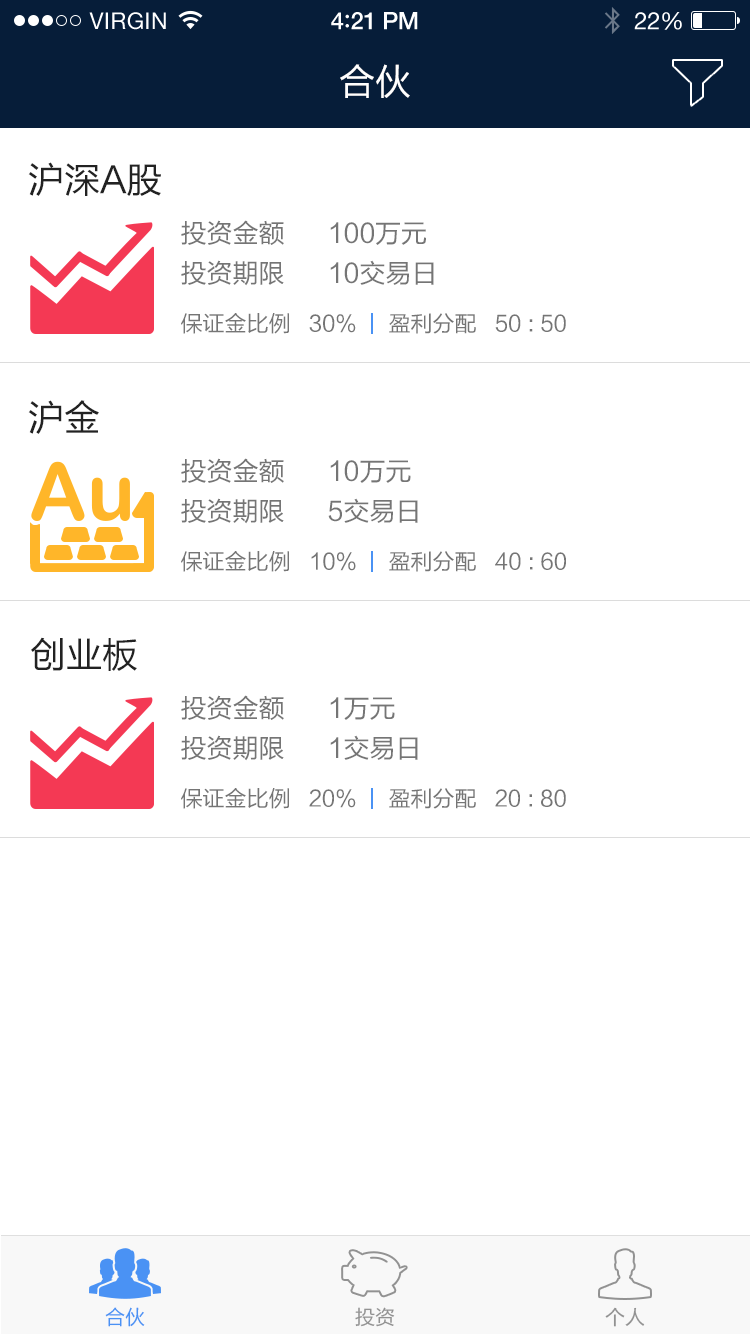
<style>
.page{position:relative;width:750px;height:1334px;background:#ffffff}
.page>*{position:absolute;margin:0}
.t1{font:36px "FZLTHK--GBK1-0";color:#ffffff}
.t2{font:36px "FZLTHK--GBK1-0";color:#222222;text-transform:uppercase}
.t3{font:26px "FZLTHK--GBK1-0";color:#757575}
.t4{font:22px "FZLTHK--GBK1-0";color:#757575}
.t5{font:20px "FZLTHK--GBK1-0";color:#4a92f4}
.t6{font:20px "FZLTHK--GBK1-0";color:#929292}
</style>
<div class="page">
<p class="t1" style="left:340px;top:64px;width:70px;height:34px">合伙</p>
<p class="t2" style="left:28px;top:162px;width:133px;height:34px">沪深A股</p>
<p class="t3" style="left:181px;top:220px;width:245px;height:25px">投资金额      100万元</p>
<p class="t3" style="left:181px;top:260px;width:253px;height:26px">投资期限      10交易日</p>
<p class="t4" style="left:181px;top:313px;width:175px;height:21px">保证金比例   30%</p>
<p class="t4" style="left:389px;top:313px;width:177px;height:21px">盈利分配   50 : 50</p>
<p class="t2" style="left:28px;top:400px;width:71px;height:34px">沪金</p>
<p class="t3" style="left:181px;top:458px;width:230px;height:25px">投资金额      10万元</p>
<p class="t3" style="left:181px;top:498px;width:237px;height:26px">投资期限      5交易日</p>
<p class="t4" style="left:181px;top:551px;width:175px;height:21px">保证金比例   10%</p>
<p class="t4" style="left:389px;top:551px;width:177px;height:21px">盈利分配   40 : 60</p>
<p class="t2" style="left:31px;top:637px;width:106px;height:34px">创业板</p>
<p class="t3" style="left:181px;top:695px;width:214px;height:25px">投资金额      1万元</p>
<p class="t3" style="left:181px;top:735px;width:237px;height:26px">投资期限      1交易日</p>
<p class="t4" style="left:181px;top:788px;width:175px;height:21px">保证金比例   20%</p>
<p class="t4" style="left:389px;top:788px;width:177px;height:21px">盈利分配   20 : 80</p>
<p class="t5" style="left:105px;top:1307px;width:40px;height:20px">合伙</p>
<p class="t6" style="left:355px;top:1307px;width:40px;height:20px">投资</p>
<p class="t6" style="left:605px;top:1307px;width:40px;height:20px">个人</p>
</div>
